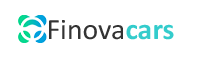
<style>
.page{position:relative;width:200px;height:57px;background:#ffffff}
.page>*{position:absolute;margin:0}
.t1{font:29.5px "Calibri";color:#333333}
.t2{font:29.5px "Calibri-Bold";color:#33cccc}
</style>
<div class="page">
<p class="t1" style="left:49px;top:20px;width:125px;height:20px">Finova<span class="t2">cars</span></p>
</div>
